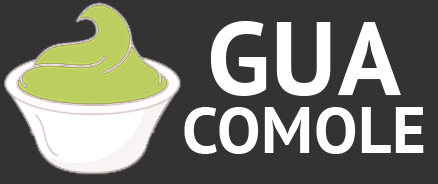
<style>
.page{position:relative;width:438px;height:184px;background:#333333}
.page>*{position:absolute;margin:0}
.t1{font:104px "PTSans-Bold";letter-spacing:0.01em;color:#ffffff}
.t2{font:65px "PTSans-Bold";letter-spacing:0.01em;color:#ffffff}
</style>
<div class="page">
<p class="t1" style="left:210px;top:21px;width:191px;height:75px">GUA</p>
<p class="t2" style="left:184px;top:107px;width:240px;height:47px">COMOLE</p>
</div>
